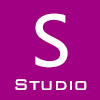
<style>
.page{position:relative;width:100px;height:100px;background:#a10082}
.page>*{position:absolute;margin:0}
.t1{font:68.2px "MicrosoftYaHei";color:#ffffff}
.t2{font:20.4px "712-CAI978";color:#ffffff}
</style>
<div class="page">
<p class="t1" style="left:35px;top:13px;width:33px;height:55px">S</p>
<p class="t2" style="left:15px;top:79px;width:72px;height:11px">Studio</p>
</div>
